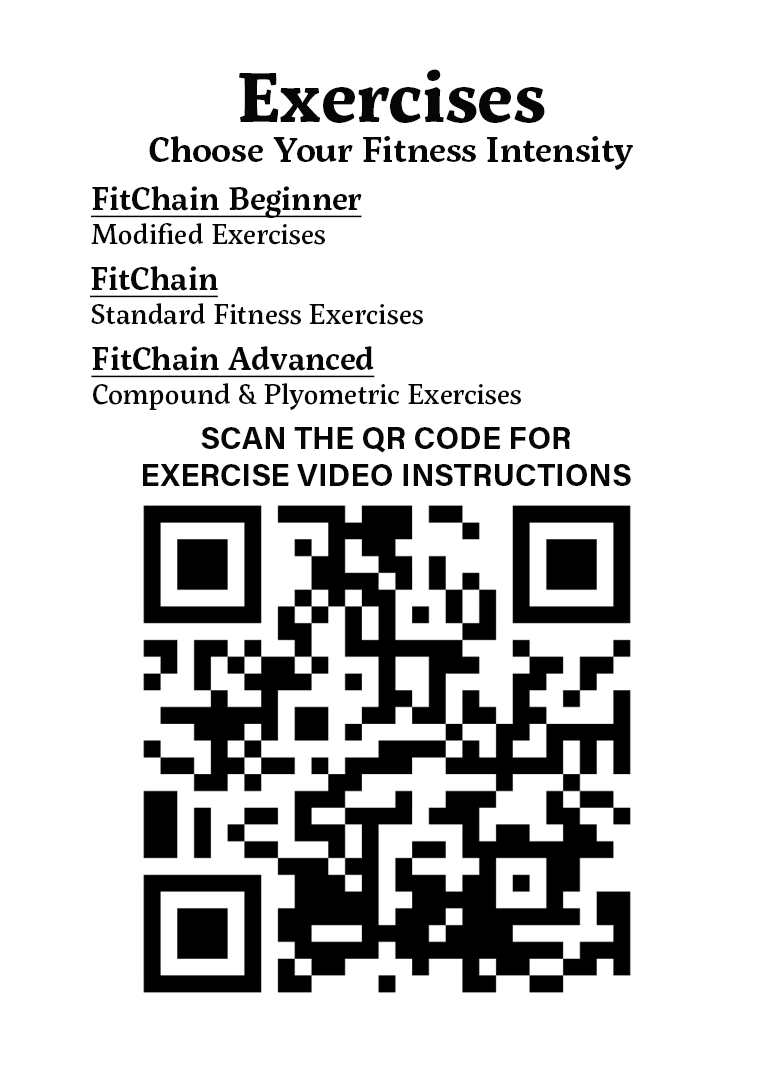
<style>
.page{position:relative;width:784px;height:1066px;background:#ffffff}
.page>*{position:absolute;margin:0}
.t1{font:70px "ServusSlab-Bold";color:#060606}
.t2{font:35px "ServusSlab-SemiBold";color:#060606}
.t3{font:28px "ServusSlab-Medium";color:#060606}
.t4{font:32px "ServusSlab-SemiBold";color:#060606;text-decoration:underline}
.t5{font:31px "AcuminPro-Bold";color:#060606}
</style>
<div class="page">
<p class="t1" style="left:239px;top:69px;width:306px;height:54px">Exercises</p>
<p class="t2" style="left:149px;top:136px;width:484px;height:34px">Choose Your Fitness Intensity</p>
<p class="t3" style="left:91px;top:186px;width:271px;height:59px"><span class="t4">FitChain Beginner<br></span>Modified Exercises</p>
<p class="t3" style="left:90px;top:266px;width:333px;height:59px"><span class="t4">FitChain<br></span>Standard Fitness Exercises</p>
<p class="t3" style="left:91px;top:346px;width:430px;height:64px"><span class="t4">FitChain Advanced<br></span>Compound &amp; Plyometric Exercises</p>
<p class="t5" style="left:143px;top:427px;width:488px;height:59px;text-align:center">SCAN THE QR CODE FOR <br>EXERCISE VIDEO INSTRUCTIONS</p>
</div>
